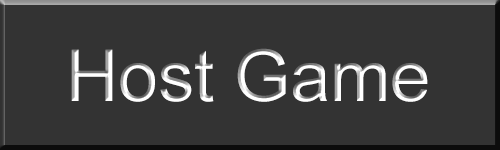
<style>
.page{position:relative;width:500px;height:150px;background:#333333}
.page>*{position:absolute;margin:0}
.t1{font:72px "ArialMT";color:#ffffff}
</style>
<div class="page">
<p class="t1" style="left:71px;top:48px;width:357px;height:54px">Host Game</p>
</div>
